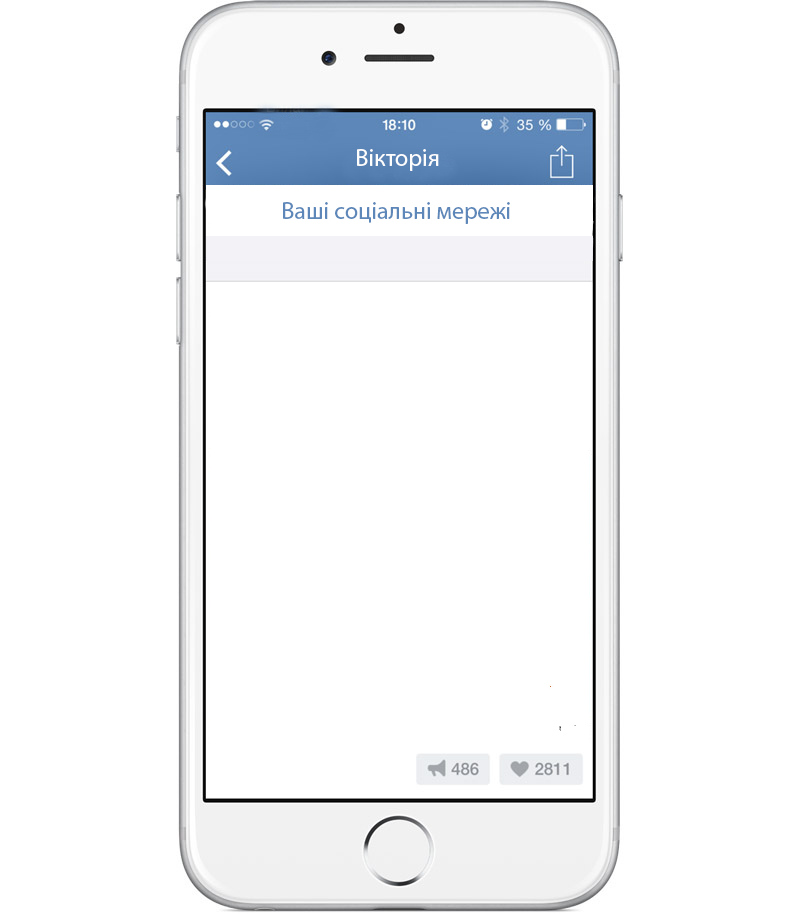
<style>
.page{position:relative;width:800px;height:913px;background:#ffffff}
.page>*{position:absolute;margin:0}
.t1{font:24px "MyriadPro-Regular";color:#fefdfd}
.t2{font:24px "MyriadPro-Regular";color:#5d87b9}
</style>
<div class="page">
<p class="t1" style="left:357px;top:149px;width:82px;height:22px">Вікторія</p>
<p class="t2" style="left:283px;top:202px;width:227px;height:22px">Ваші соціальні мережі</p>
</div>
